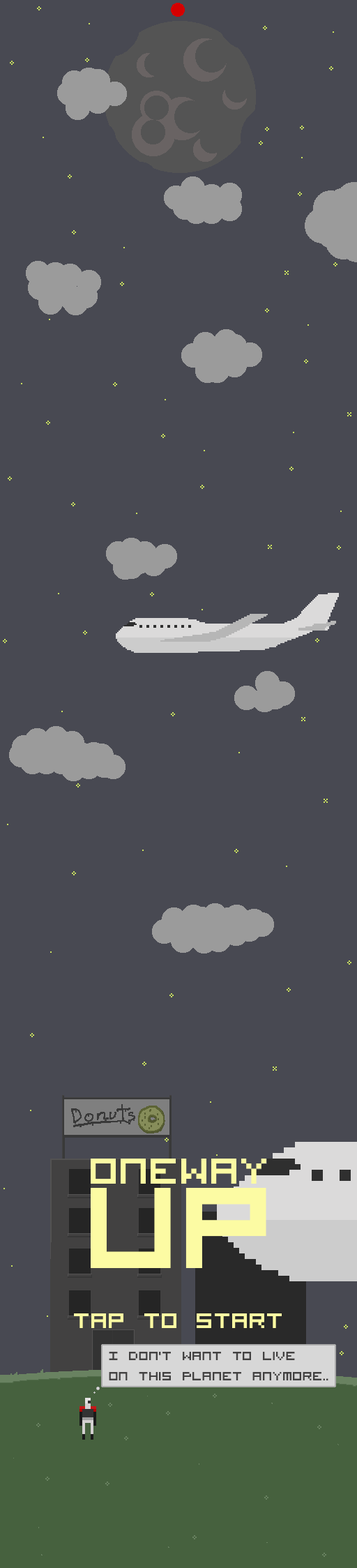
<style>
.page{position:relative;width:357px;height:1568px;background:#484952}
.page>*{position:absolute;margin:0}
.t1{font:50.2px "VisitorTT1BRK";color:#fcfba3}
.t2{font:159.7px "VisitorTT1BRK";color:#fcfba3}
.t3{font:29.3px "VisitorTT1BRK";color:#fcfba3}
.t4{font:16.7px "VisitorTT1BRK";color:#424141}
</style>
<div class="page">
<p class="t1" style="left:91px;top:1159px;width:175px;height:25px">OneWay</p>
<p class="t2" style="left:91px;top:1188px;width:175px;height:80px">Up</p>
<p class="t3" style="left:74px;top:1313px;width:208px;height:15px">Tap to start</p>
<p class="t4" style="left:109px;top:1352px;width:220px;height:28px">I Don't Want to Live <br>on This Planet Anymore..</p>
</div>
